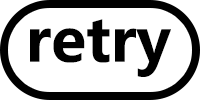
<style>
.page{position:relative;width:200px;height:100px;background:#ffffff}
.page>*{position:absolute;margin:0}
.t1{font:60px "MicrosoftYaHei-Bold";color:#000000}
</style>
<div class="page">
<p class="t1" style="left:30px;top:19px;width:141px;height:58px">retry</p>
</div>
